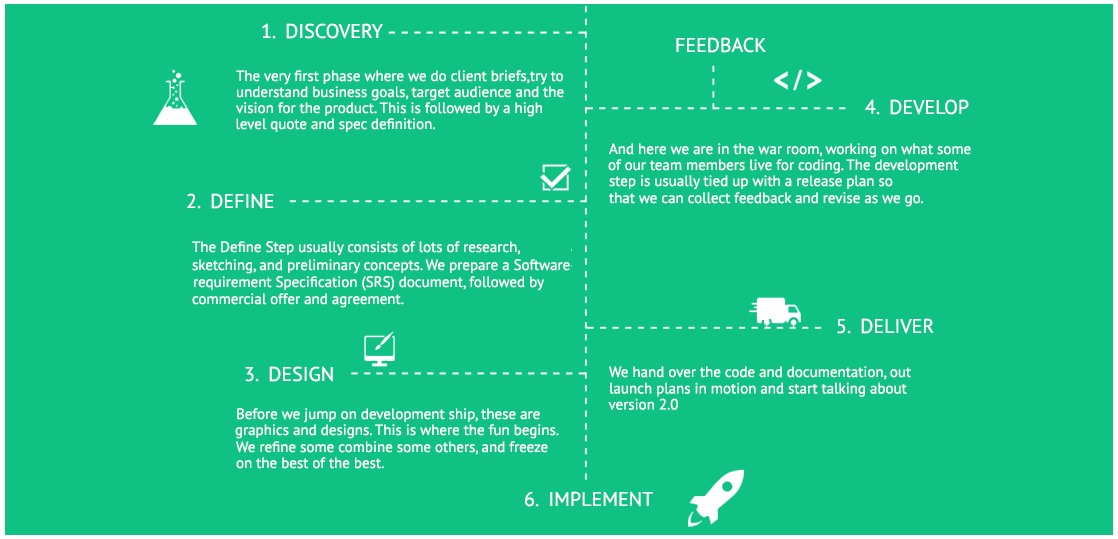
<style>
.page{position:relative;width:1118px;height:539px;background:#0fc284}
.page>*{position:absolute;margin:0}
.t1{font:20px "PTSans-Regular";color:#ffffff}
.t2{font:15px "PTSans-Regular";color:#ffffff}
</style>
<div class="page">
<p class="t1" style="left:262px;top:23px;width:121px;height:16px">1.  DISCOVERY</p>
<p class="t1" style="left:676px;top:37px;width:90px;height:16px">FEEDBACK</p>
<p class="t2" style="left:236px;top:70px;width:327px;height:15px">The very first phase where we do client briefs,try to</p>
<p class="t2" style="left:237px;top:86px;width:327px;height:15px">understand business goals, target audience and the</p>
<p class="t2" style="left:236px;top:102px;width:306px;height:15px">vision for the product. This is followed by a high</p>
<p class="t1" style="left:865px;top:99px;width:104px;height:16px">4.  DEVELOP</p>
<p class="t2" style="left:236px;top:118px;width:199px;height:14px">level quote and spec definition.</p>
<p class="t2" style="left:609px;top:143px;width:362px;height:15px">And here we are in the war room, working on what some</p>
<p class="t2" style="left:608px;top:159px;width:351px;height:15px">of our team members live for coding. The development</p>
<p class="t2" style="left:609px;top:175px;width:284px;height:15px">step is usually tied up with a release plan so</p>
<p class="t1" style="left:187px;top:193px;width:87px;height:16px">2.  DEFINE</p>
<p class="t2" style="left:609px;top:192px;width:314px;height:15px">that we can collect feedback and revise as we go.</p>
<p class="t2" style="left:192px;top:241px;width:328px;height:15px">The Define Step usually consists of lots of research,</p>
<p class="t2" style="left:192px;top:259px;width:378px;height:15px">sketching, and preliminary concepts. We prepare a Software</p>
<p class="t2" style="left:194px;top:276px;width:350px;height:15px">requirement Specification (SRS) document, followed by</p>
<p class="t2" style="left:192px;top:293px;width:212px;height:15px">commercial offer and agreement.</p>
<p class="t1" style="left:837px;top:318px;width:97px;height:16px">5.  DELIVER</p>
<p class="t1" style="left:245px;top:366px;width:88px;height:16px">3.  DESIGN</p>
<p class="t2" style="left:609px;top:366px;width:302px;height:14px">We hand over the code and documentation, out</p>
<p class="t2" style="left:610px;top:382px;width:297px;height:15px">launch plans in motion and start talking about</p>
<p class="t2" style="left:608px;top:398px;width:70px;height:12px">version 2.0</p>
<p class="t2" style="left:237px;top:408px;width:303px;height:15px">Before we jump on development ship, these are</p>
<p class="t2" style="left:235px;top:424px;width:324px;height:15px">graphics and designs. This is where the fun begins.</p>
<p class="t2" style="left:236px;top:441px;width:312px;height:14px">We refine some combine some others, and freeze</p>
<p class="t2" style="left:236px;top:457px;width:148px;height:12px">on the best of the best.</p>
<p class="t1" style="left:525px;top:491px;width:128px;height:16px">6.  IMPLEMENT</p>
</div>
